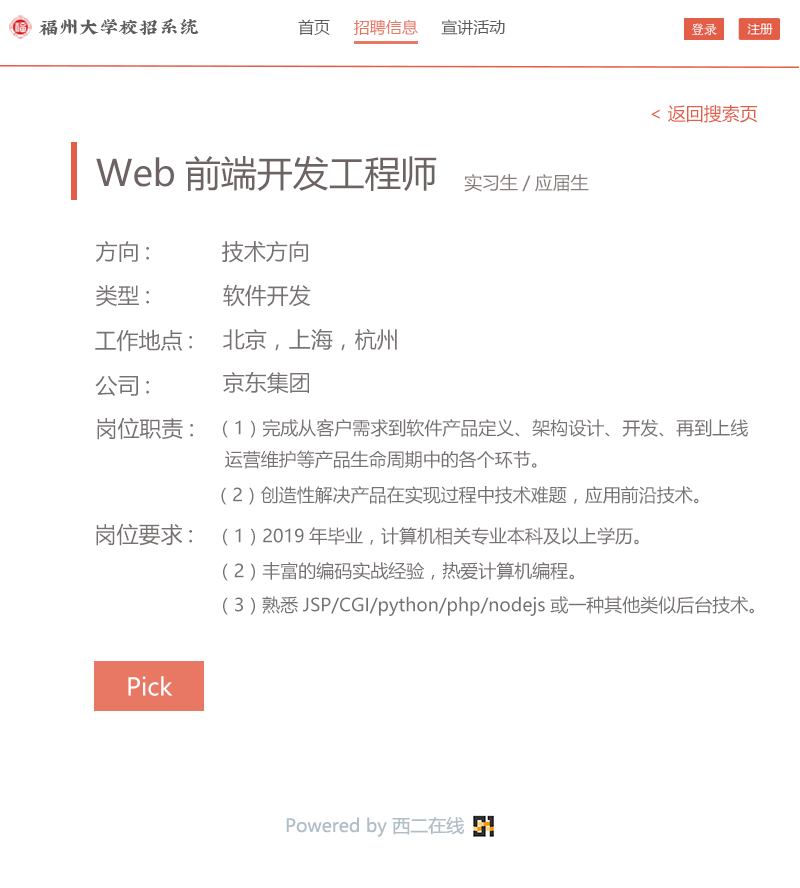
<style>
.page{position:relative;width:800px;height:888px;background:#ffffff}
.page>*{position:absolute;margin:0}
.t1{font:20px "XiQuezhaopaiti-Regular";color:#5d5b5b}
.t2{font:16px "MicrosoftYaHei";color:#e87764}
.t3{font:16px "MicrosoftYaHei";color:#5d5b5b}
.t4{font:18px "MicrosoftYaHei";color:#e45d47}
.t5{font:36px "MicrosoftYaHei";color:#6d6363}
.t6{font:18px "MicrosoftYaHei";color:#887d7d}
.t7{font:22px "MicrosoftYaHei";color:#777272}
.t8{font:18px "MicrosoftYaHei";color:#777272}
.t9{font:24px "MicrosoftYaHei";color:#ffffff}
.t10{font:18px "MicrosoftYaHei";color:#b0bec7}
</style>
<div class="page">
<p class="t1" style="left:39px;top:18px;width:160px;height:18px">福州大学校招系统</p>
<p class="t2" style="left:298px;top:19px;width:207px;height:17px"><span class="t3">首页     </span>招聘信息 <span class="t3">    宣讲活动</span></p>
<p class="t4" style="left:651px;top:105px;width:107px;height:18px">&lt; 返回搜索页</p>
<p class="t5" style="left:96px;top:156px;width:341px;height:35px">Web前端开发工程师</p>
<p class="t6" style="left:464px;top:174px;width:125px;height:18px">实习生/应届生</p>
<p class="t7" style="left:95px;top:241px;width:54px;height:21px">方向:</p>
<p class="t7" style="left:222px;top:241px;width:86px;height:22px">技术方向</p>
<p class="t7" style="left:96px;top:285px;width:53px;height:22px">类型:</p>
<p class="t7" style="left:223px;top:284px;width:88px;height:23px">软件开发</p>
<p class="t7" style="left:95px;top:329px;width:97px;height:23px">工作地点:</p>
<p class="t7" style="left:223px;top:328px;width:174px;height:23px">北京，上海，杭州</p>
<p class="t7" style="left:95px;top:375px;width:54px;height:21px">公司:</p>
<p class="t7" style="left:223px;top:371px;width:86px;height:23px">京东集团</p>
<p class="t7" style="left:97px;top:417px;width:96px;height:23px">岗位职责:</p>
<p class="t8" style="left:223px;top:419px;width:525px;height:50px">（1）完成从客户需求到软件产品定义、架构设计、开发、再到上线<br>运营维护等产品生命周期中的各个环节。</p>
<p class="t8" style="left:221px;top:486px;width:478px;height:19px">（2）创造性解决产品在实现过程中技术难题，应用前沿技术。</p>
<p class="t7" style="left:96px;top:523px;width:96px;height:23px">岗位要求:</p>
<p class="t8" style="left:223px;top:527px;width:416px;height:19px">（1）2019年毕业，计算机相关专业本科及以上学历。</p>
<p class="t8" style="left:223px;top:562px;width:351px;height:19px">（2）丰富的编码实战经验，热爱计算机编程。</p>
<p class="t8" style="left:223px;top:596px;width:531px;height:20px">（3）熟悉JSP/CGI/python/php/nodejs或一种其他类似后台技术。</p>
<p class="t9" style="left:128px;top:676px;width:45px;height:20px">Pick</p>
<p class="t10" style="left:286px;top:816px;width:178px;height:21px">Powered by 西二在线</p>
</div>
